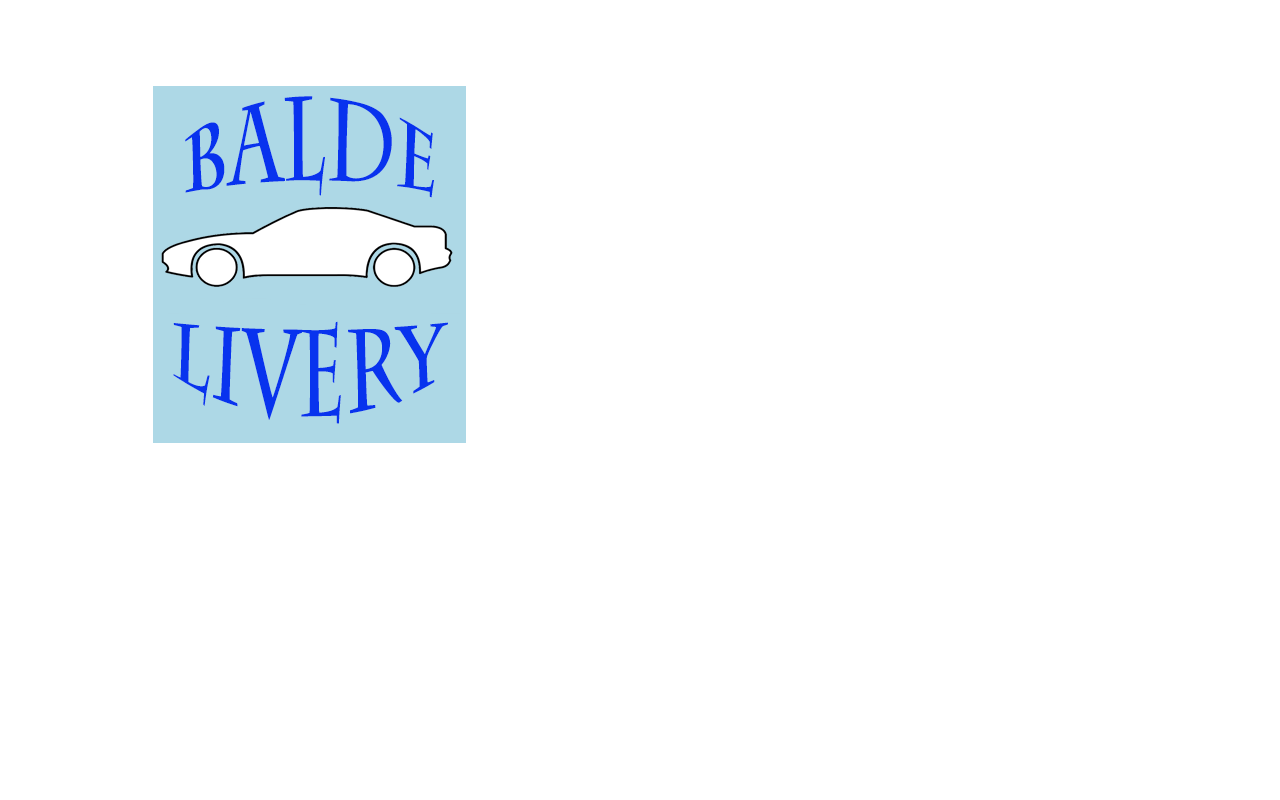
<style>
.page{position:relative;width:1280px;height:800px;background:#ffffff}
.page>*{position:absolute;margin:0}
.t1{font:72px "CharlemagneStd-Bold";color:#0832ee}
.t2{font:72px "CharlemagneStd-Bold";color:#0833ee}
</style>
<div class="page">
<p class="t1" style="left:185px;top:96px;width:249px;height:102px">BALDE</p>
<p class="t2" style="left:173px;top:321px;width:275px;height:103px">LIVERY</p>
</div>
